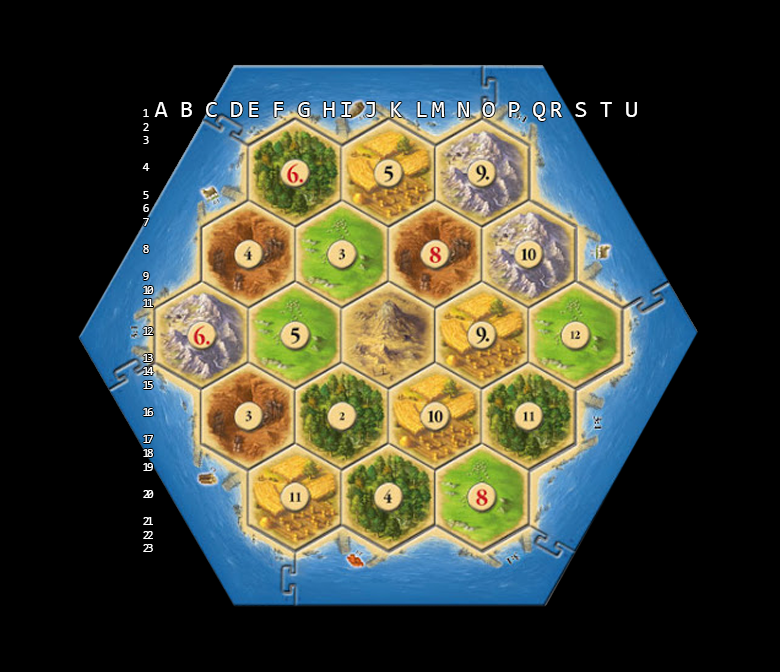
<style>
.page{position:relative;width:780px;height:672px;background:#000000}
.page>*{position:absolute;margin:0}
.t1{font:24px "Consolas";letter-spacing:-0.2em;color:#ffffff}
.t2{font:12px/8px "Consolas";letter-spacing:-0.2em;color:#ffffff}
</style>
<div class="page">
<p class="t1" style="left:154px;top:102px;width:483px;height:19px">A  B  C  D E  F  G  H I  J  K  L M  N  O  P  Q R  S  T  U</p>
<p class="t2" style="left:142px;top:109px;width:12px;height:443px">1<br><br>2<br><br>3<br><br><br><br>4<br><br><br><br>5<br><br>6<br><br>7<br><br><br><br>8<br><br><br><br>9<br><br>10<br><br>11<br><br><br><br>12<br><br><br><br>13<br><br>14<br><br>15<br><br><br><br>16<br><br><br><br>17<br><br>18<br><br>19<br><br><br><br>20<br><br><br><br>21<br><br>22<br><br>23</p>
</div>
